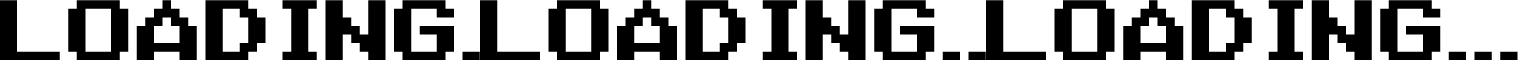
<style>
.page{position:relative;width:1518px;height:60px;background:#ffffff}
.page>*{position:absolute;margin:0}
.t1{font:60px "Nineteen-Eighty-Seven";color:#000000}
</style>
<div class="page">
<p class="t1" style="left:0px;top:0px;width:480px;height:61px">LOADING.</p>
<p class="t1" style="left:480px;top:0px;width:506px;height:61px">LOADING..</p>
<p class="t1" style="left:986px;top:0px;width:532px;height:61px">LOADING...</p>
</div>
